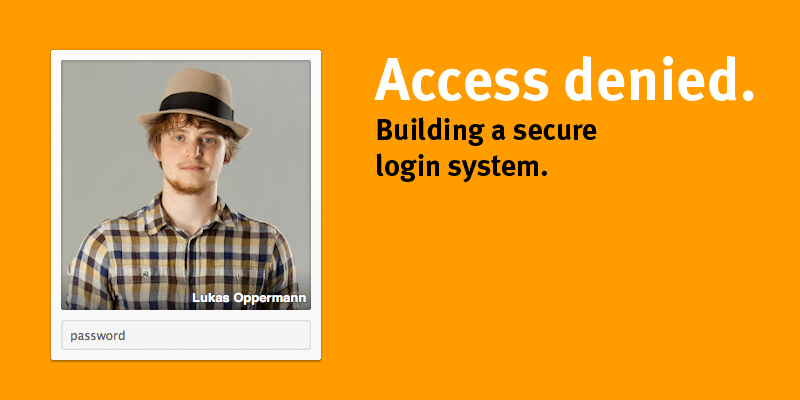
<style>
.page{position:relative;width:800px;height:400px;background:#ff9c00}
.page>*{position:absolute;margin:0}
.t1{font:60px "MetaPlusBold-Roman";color:#ffffff}
.t2{font:30px "MetaPlusBold-Roman";color:#000000}
</style>
<div class="page">
<p class="t1" style="left:374px;top:55px;width:380px;height:46px">Access denied.</p>
<p class="t2" style="left:376px;top:117px;width:221px;height:66px">Building a secure<br>login system.</p>
</div>
